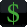
<style>
.page{position:relative;width:27px;height:27px;background:#000000}
.page>*{position:absolute;margin:0}
.t1{font:40px "AdobeArabic-Regular";color:#44a83a}
</style>
<div class="page">
<p class="t1" style="left:7px;top:2px;width:12px;height:23px">$</p>
</div>
